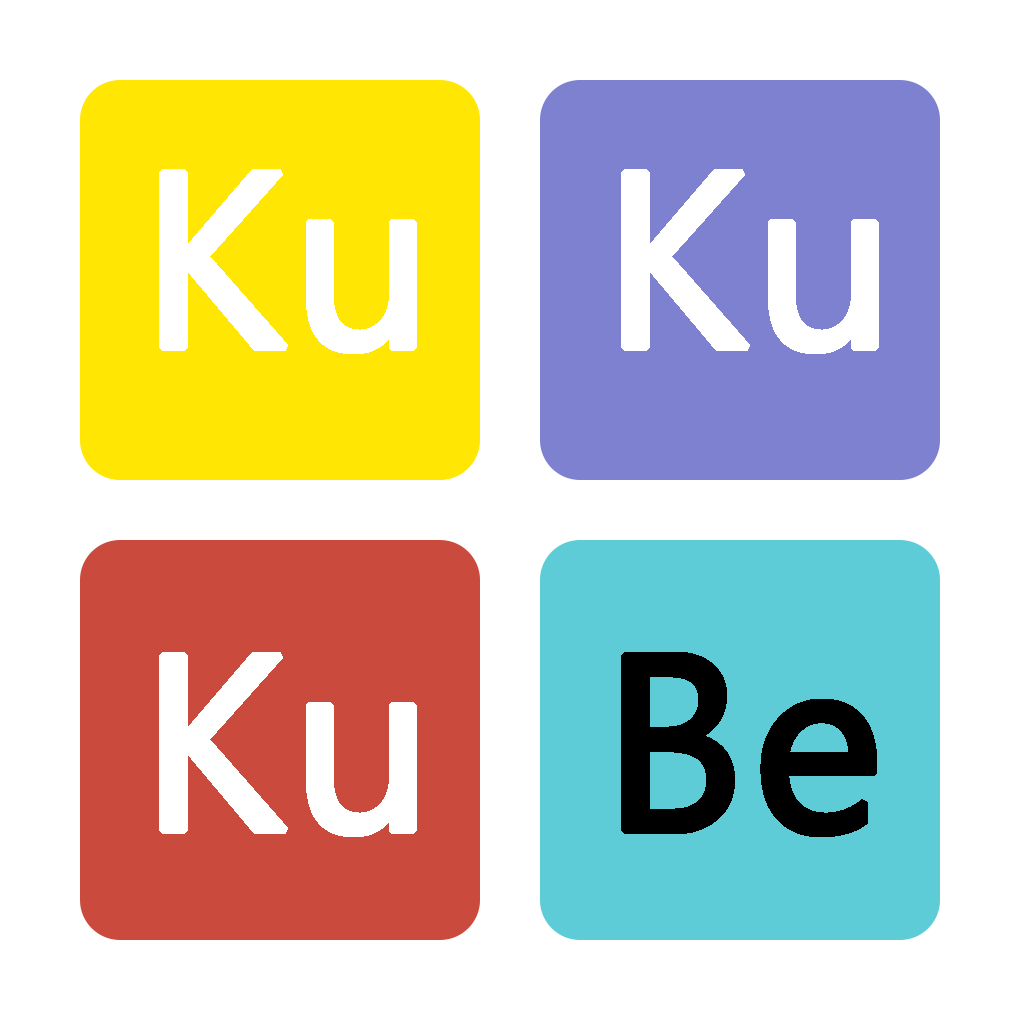
<style>
.page{position:relative;width:1024px;height:1024px;background:#ffffff}
.page>*{position:absolute;margin:0}
.t1{font:250px "SegoeUI";color:#ffffff;font-weight:bold}
.t2{font:250px "SegoeUI";color:#000000;font-weight:bold}
</style>
<div class="page">
<p class="t1" style="left:159px;top:169px;width:258px;height:185px">Ku</p>
<p class="t1" style="left:621px;top:169px;width:258px;height:185px">Ku</p>
<p class="t1" style="left:159px;top:652px;width:258px;height:185px">Ku</p>
<p class="t2" style="left:621px;top:652px;width:256px;height:185px">Be</p>
</div>
